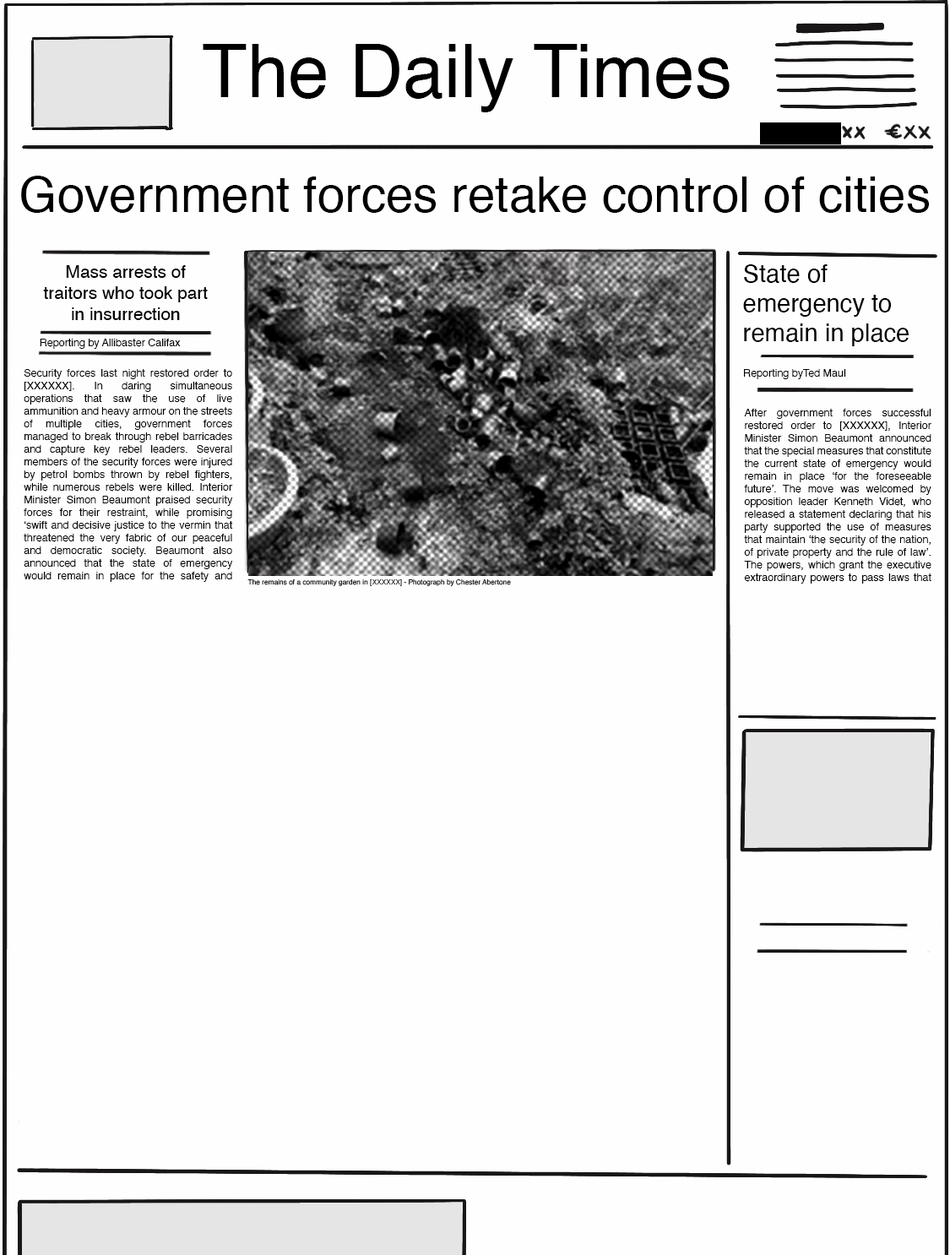
<style>
.page{position:relative;width:950px;height:1255px;background:#fefefe}
.page>*{position:absolute;margin:0}
.t1{font:73.9px "Helvetica";color:#000000}
.t2{font:56.3px "Helvetica";color:#000000}
.t3{font:70.4px "Helvetica";color:#000000}
.t4{font:105.6px "Helvetica";color:#000000}
.t5{font:49.3px "Helvetica";color:#000000}
.t6{font:17.6px "Helvetica";color:#000000}
.t7{font:24.6px "Helvetica";color:#000000}
.t8{font:10.6px "Helvetica";color:#000000}
.t9{font:7px "Helvetica";color:#000000}
</style>
<div class="page">
<p class="t1" style="left:203px;top:44px;width:527px;height:68px">The Daily Times <span class="t2">Ti</span><span class="t3">Times</span><span class="t4">Times</span></p>
<p class="t5" style="left:21px;top:176px;width:909px;height:37px">Government forces retake control of cities</p>
<p class="t6" style="left:43px;top:265px;width:165px;height:55px;text-align:center">Mass arrests of traitors who took part in insurrection</p>
<p class="t7" style="left:743px;top:264px;width:166px;height:82px">State of emergency to remain in place</p>
<p class="t8" style="left:40px;top:339px;width:141px;height:10px">Reporting by Allibaster Califax</p>
<p class="t8" style="left:24px;top:369px;width:209px;height:213px;text-align:justify">Security forces last night restored order to [XXXXXX]. In daring simultaneous operations that saw the use of live ammunition and heavy armour on the streets of multiple cities, government forces managed to break through rebel barricades and capture key rebel leaders. Several members of the security forces were injured by petrol bombs thrown by rebel fighters, while numerous rebels were killed. Interior Minister Simon Beaumont praised security forces for their restraint, while promising ‘swift and decisive justice to the vermin that threatened the very fabric of our peaceful and democratic society. Beaumont also announced that the state of emergency would remain in place for the safety and security of this great nation.</p>
<p class="t8" style="left:744px;top:369px;width:102px;height:10px">Reporting byTed Maul</p>
<p class="t8" style="left:744px;top:409px;width:188px;height:175px;text-align:justify">After government forces successful restored order to [XXXXXX], Interior Minister Simon Beaumont announced that the special measures that constitute the current state of emergency would remain in place ‘for the foreseeable future’. The move was welcomed by opposition leader Kenneth Videt, who released a statement declaring that his party supported the use of measures that maintain ‘the security of the nation, of private property and the rule of law’. The powers, which grant the executive extraordinary powers to pass laws that keep</p>
<p class="t9" style="left:247px;top:579px;width:264px;height:7px">The remains of a community garden in [XXXXXX] - Photograph by Chester Abertone</p>
</div>
